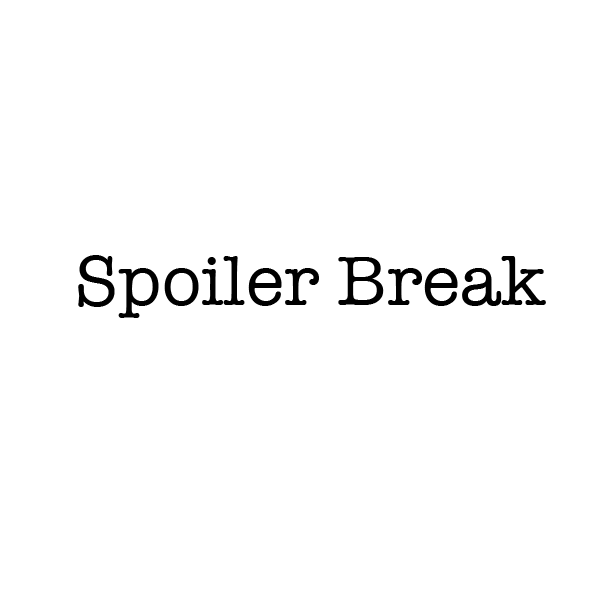
<style>
.page{position:relative;width:615px;height:605px;background:#ffffff}
.page>*{position:absolute;margin:0}
.t1{font:72px "AmericanTypewriter";color:#000000}
</style>
<div class="page">
<p class="t1" style="left:78px;top:255px;width:468px;height:63px">Spoiler Break</p>
</div>
